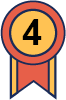
<style>
.page{position:relative;width:66px;height:100px;background:#ffffff}
.page>*{position:absolute;margin:0}
.t1{font:36px "Arial-BoldMT";color:#000000}
</style>
<div class="page">
<p class="t1" style="left:22px;top:19px;width:20px;height:26px">4</p>
</div>
